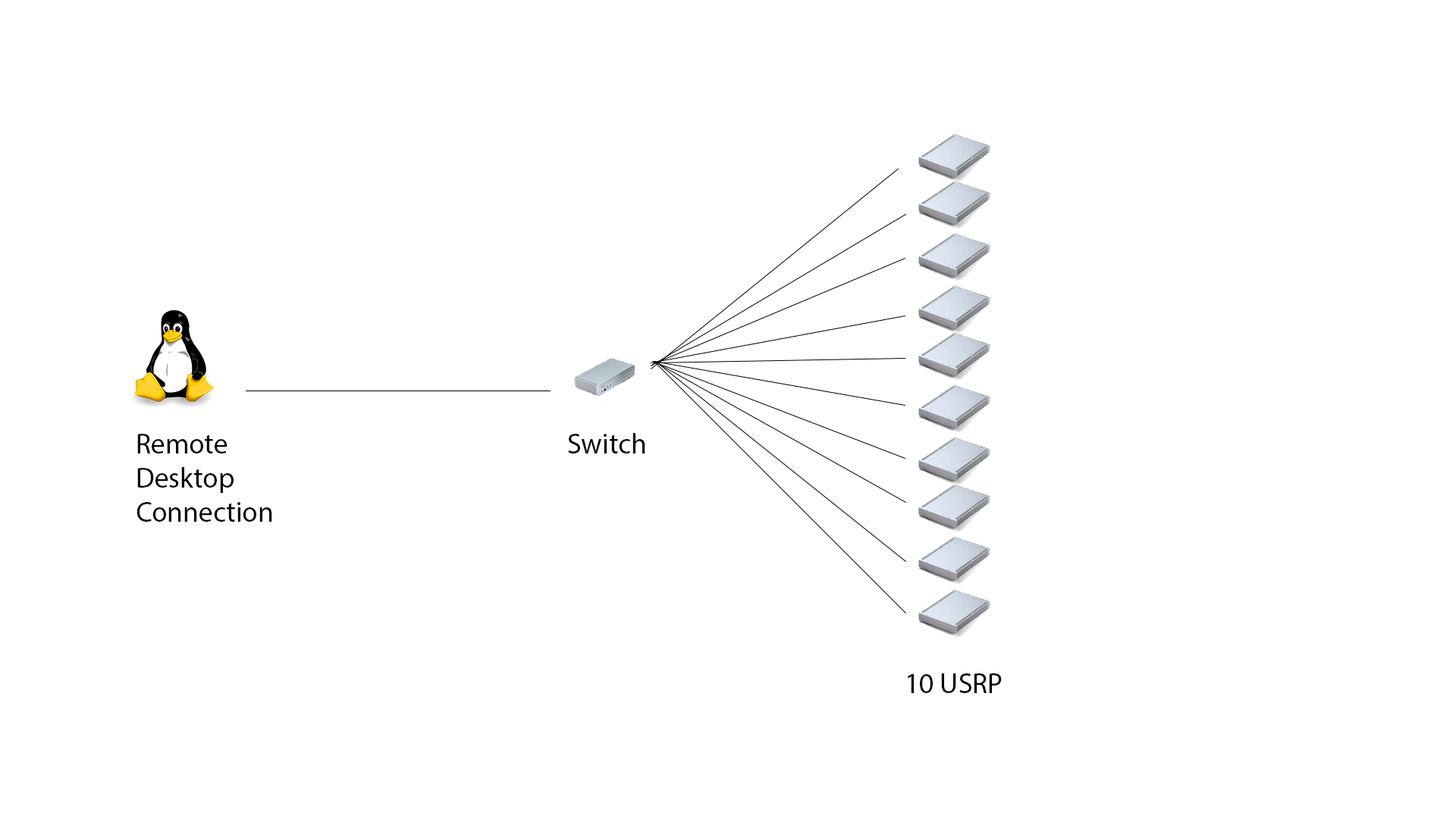
<style>
.page{position:relative;width:1456px;height:819px;background:#ffffff}
.page>*{position:absolute;margin:0}
.t1{font:28.4px "MyriadPro-Regular";color:#000000}
</style>
<div class="page">
<p class="t1" style="left:136px;top:434px;width:136px;height:88px">Remote Desktop Connection</p>
<p class="t1" style="left:568px;top:433px;width:77px;height:20px">Switch</p>
<p class="t1" style="left:907px;top:673px;width:95px;height:20px">10 USRP</p>
</div>
